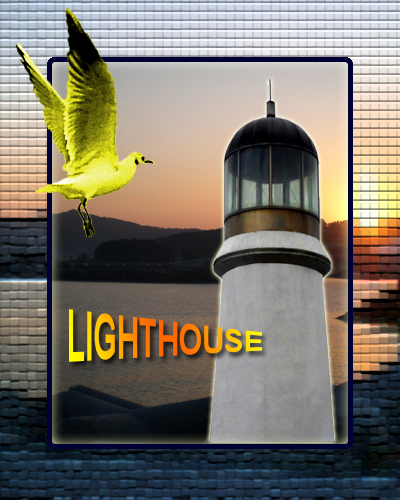
<style>
.page{position:relative;width:400px;height:500px}
.page>*{position:absolute;margin:0}
.t1{font:48.1px "Arial-BoldMT";scale:0.63 1}
</style>
<div class="page">
<p class="t1" style="left:69px;top:309px;width:193px;height:53px">LIGHTHOUSE</p>
</div>
